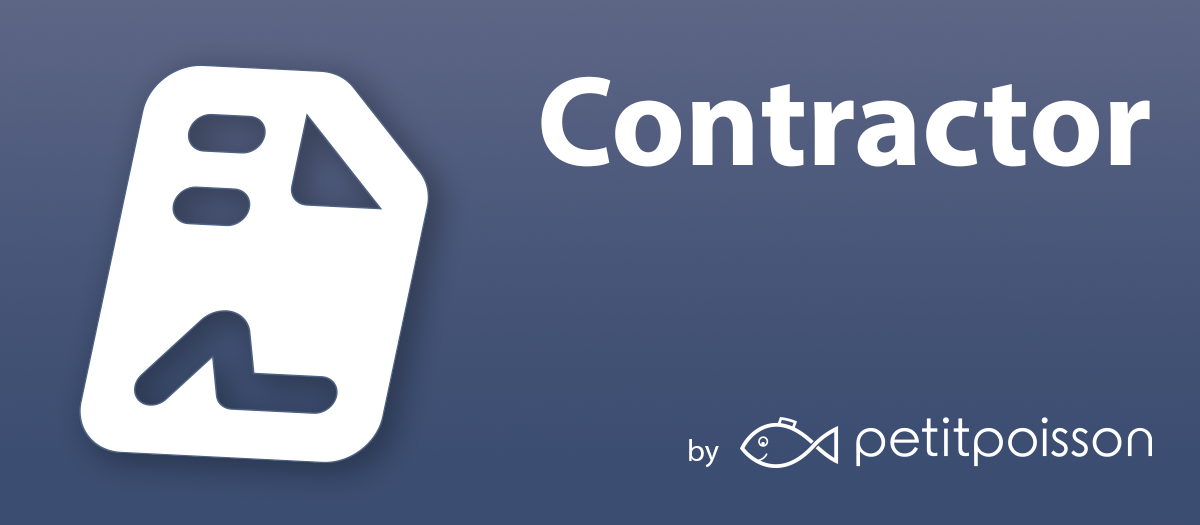
<style>
.page{position:relative;width:1200px;height:525px}
.page>*{position:absolute;margin:0}
.t1{font:128.7px "MyriadPro-Bold";color:#ffffff}
.t2{font:30px "MyriadPro-Regular";color:#ffffff}
</style>
<div class="page">
<p class="t1" style="left:541px;top:76px;width:609px;height:91px">Contractor</p>
<p class="t2" style="left:689px;top:439px;width:30px;height:29px">by</p>
</div>
